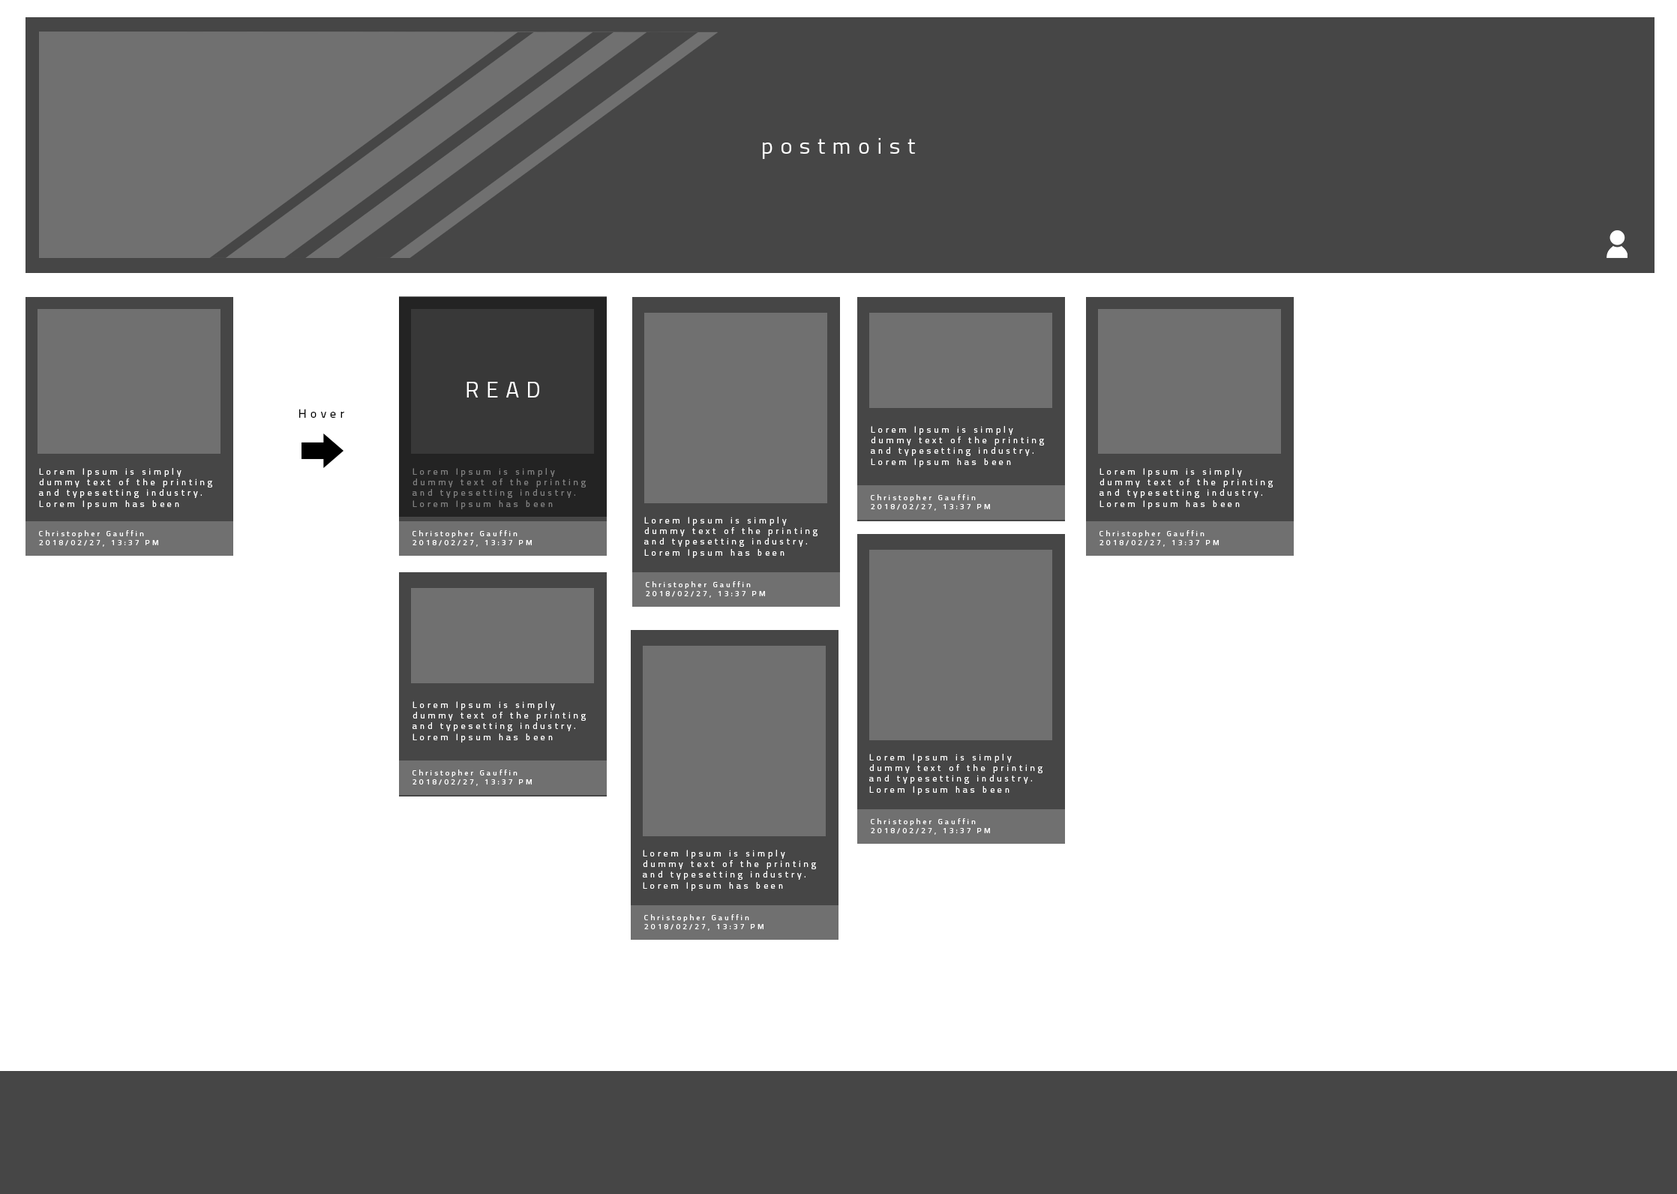
<style>
.page{position:relative;width:1677px;height:1194px;background:#ffffff}
.page>*{position:absolute;margin:0}
.t1{font:22.5px "Titillium-Regular";letter-spacing:0.32em;color:#ffffff}
.t2{font:12px "Titillium-Regular";letter-spacing:0.32em;color:#000000}
.t3{font:9px "Titillium-Regular";letter-spacing:0.32em;color:#ffffff}
.t4{font:9px "Titillium-Regular";letter-spacing:0.32em;color:#7f7f7f}
.t5{font:7.5px "Titillium-Regular";letter-spacing:0.32em;color:#ffffff}
</style>
<div class="page">
<p class="t1" style="left:763px;top:138px;width:152px;height:21px">postmoist</p>
<p class="t1" style="left:466px;top:382px;width:73px;height:16px">READ</p>
<p class="t2" style="left:299px;top:409px;width:45px;height:9px">Hover</p>
<p class="t3" style="left:871px;top:426px;width:173px;height:41px">Lorem Ipsum is simply dummy text of the printing and typesetting industry. Lorem Ipsum has been</p>
<p class="t3" style="left:39px;top:468px;width:173px;height:41px">Lorem Ipsum is simply dummy text of the printing and typesetting industry. Lorem Ipsum has been</p>
<p class="t4" style="left:412px;top:468px;width:174px;height:41px">Lorem Ipsum is simply dummy text of the printing and typesetting industry. Lorem Ipsum has been</p>
<p class="t3" style="left:1100px;top:468px;width:173px;height:41px">Lorem Ipsum is simply dummy text of the printing and typesetting industry. Lorem Ipsum has been</p>
<p class="t5" style="left:871px;top:494px;width:119px;height:17px">Christopher Gauffin<br>2018/02/27, 13:37 PM</p>
<p class="t3" style="left:644px;top:517px;width:174px;height:41px">Lorem Ipsum is simply dummy text of the printing and typesetting industry. Lorem Ipsum has been</p>
<p class="t5" style="left:39px;top:530px;width:119px;height:17px">Christopher Gauffin<br>2018/02/27, 13:37 PM</p>
<p class="t5" style="left:412px;top:530px;width:120px;height:17px">Christopher Gauffin<br>2018/02/27, 13:37 PM</p>
<p class="t5" style="left:1100px;top:530px;width:119px;height:17px">Christopher Gauffin<br>2018/02/27, 13:37 PM</p>
<p class="t5" style="left:646px;top:581px;width:119px;height:17px">Christopher Gauffin<br>2018/02/27, 13:37 PM</p>
<p class="t3" style="left:412px;top:701px;width:174px;height:41px">Lorem Ipsum is simply dummy text of the printing and typesetting industry. Lorem Ipsum has been</p>
<p class="t3" style="left:869px;top:754px;width:173px;height:41px">Lorem Ipsum is simply dummy text of the printing and typesetting industry. Lorem Ipsum has been</p>
<p class="t5" style="left:412px;top:770px;width:120px;height:16px">Christopher Gauffin<br>2018/02/27, 13:37 PM</p>
<p class="t5" style="left:871px;top:818px;width:119px;height:17px">Christopher Gauffin<br>2018/02/27, 13:37 PM</p>
<p class="t3" style="left:643px;top:850px;width:173px;height:41px">Lorem Ipsum is simply dummy text of the printing and typesetting industry. Lorem Ipsum has been</p>
<p class="t5" style="left:644px;top:914px;width:120px;height:17px">Christopher Gauffin<br>2018/02/27, 13:37 PM</p>
</div>
